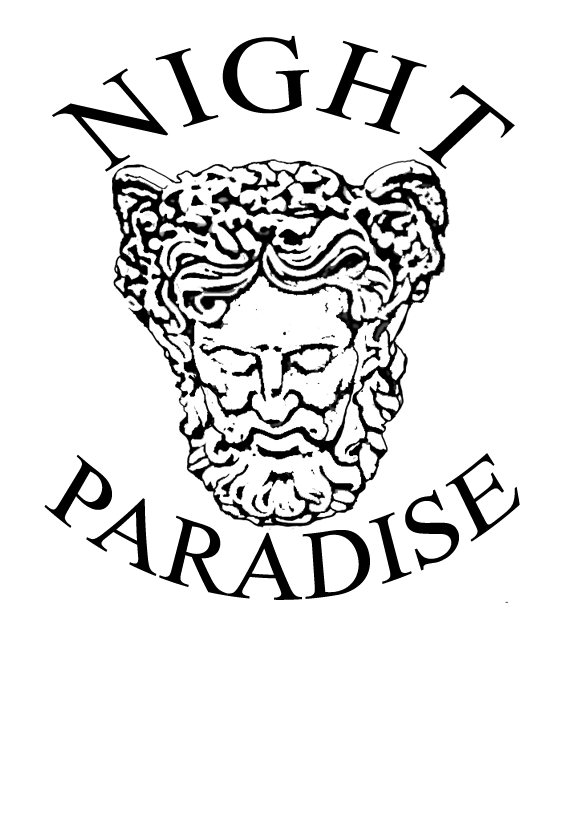
<style>
.page{position:relative;width:564px;height:835px;background:#ffffff}
.page>*{position:absolute;margin:0}
.t1{font:128px "MongolianBaiti";color:#000000;text-transform:uppercase;scale:0.86 1}
.t2{font:97.8px "MongolianBaiti";color:#000000;text-transform:uppercase;scale:0.84 1}
</style>
<div class="page">
<p class="t1" style="left:52px;top:35px;width:463px;height:137px;rotate:-97deg">NIGHT</p>
<p class="t2" style="left:44px;top:453px;width:476px;height:147px;rotate:-1deg">PARADISE</p>
</div>
